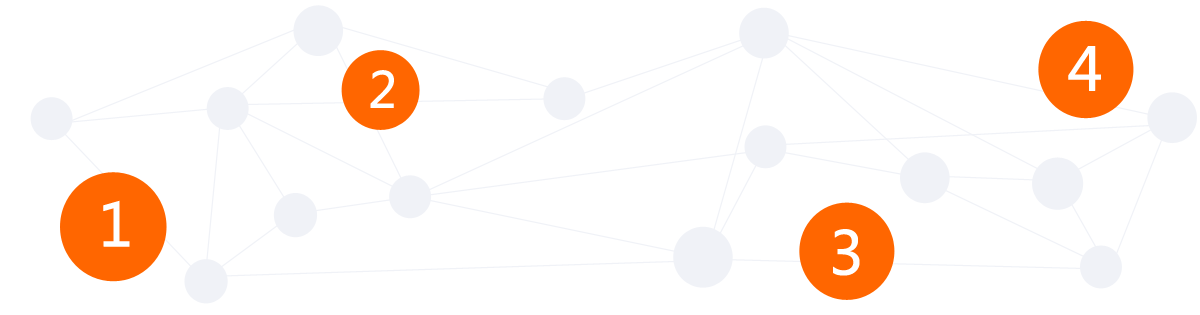
<style>
.page{position:relative;width:1200px;height:315px;background:#ffffff}
.page>*{position:absolute;margin:0}
.t1{font:58.8px "MicrosoftYaHei";color:#ffffff;font-weight:bold}
.t2{font:49px "MicrosoftYaHei";color:#ffffff;font-weight:bold}
</style>
<div class="page">
<p class="t1" style="left:1068px;top:46px;width:33px;height:45px">4</p>
<p class="t2" style="left:370px;top:70px;width:24px;height:38px">2</p>
<p class="t1" style="left:103px;top:200px;width:27px;height:47px">1</p>
<p class="t1" style="left:833px;top:229px;width:27px;height:47px">3</p>
</div>
